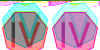
<style>
.page{position:relative;width:100px;height:50px}
.page>*{position:absolute;margin:0}
.t1{font:33.3px "MicrosoftYaHei"}
</style>
<div class="page">
<p class="t1" style="left:11px;top:12px;width:30px;height:26px">IV</p>
<p class="t1" style="left:61px;top:12px;width:30px;height:26px">IV</p>
</div>
